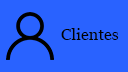
<style>
.page{position:relative;width:128px;height:72px;background:#2962ff}
.page>*{position:absolute;margin:0}
.t1{font:16.2px "Georgia";color:#000000}
</style>
<div class="page">
<p class="t1" style="left:61px;top:28px;width:58px;height:12px">Clientes</p>
</div>
